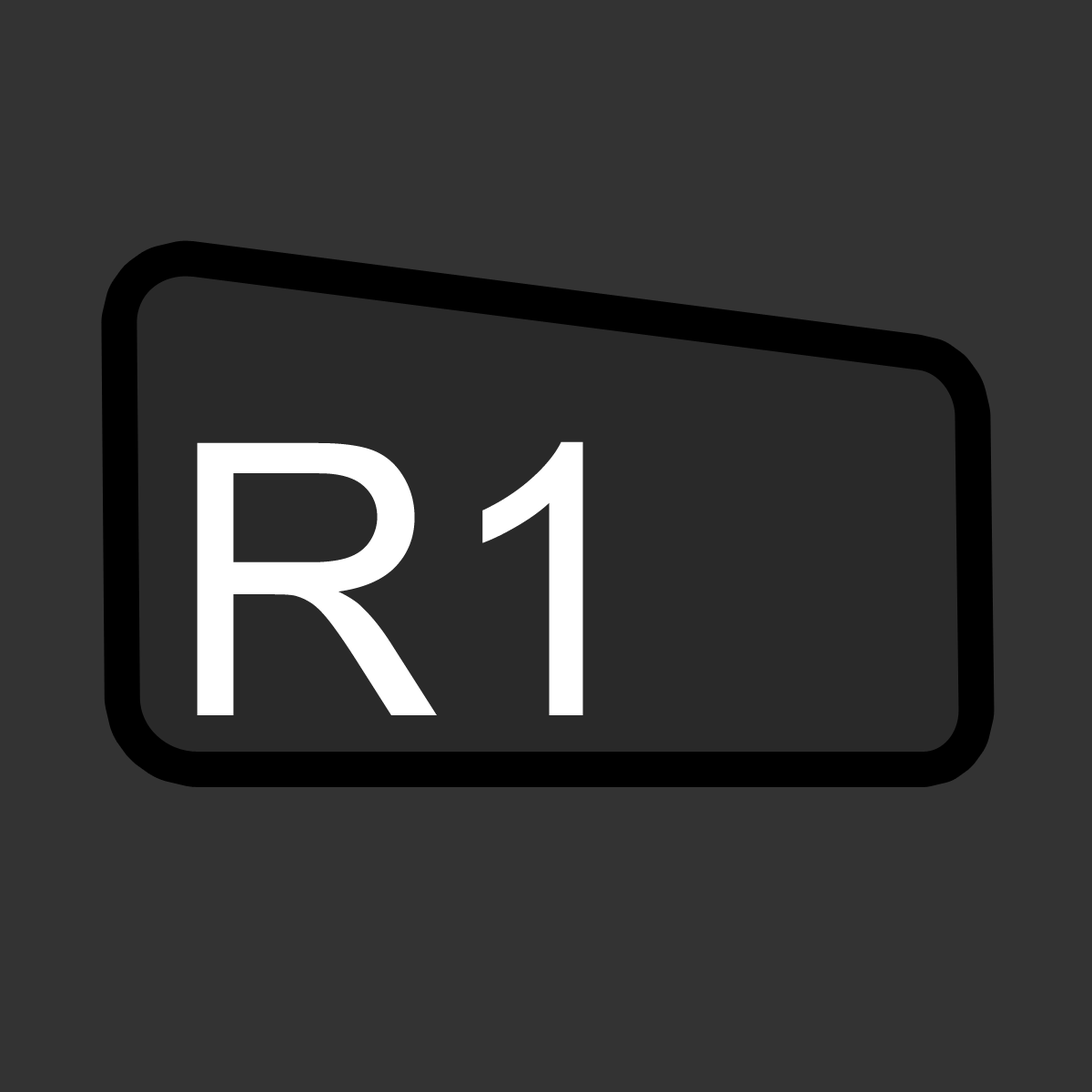
<style>
.page{position:relative;width:1092px;height:1092px;background:#333333}
.page>*{position:absolute;margin:0}
.t1{font:379.2px "ArialMT";color:#ffffff}
</style>
<div class="page">
<p class="t1" style="left:197px;top:441px;width:386px;height:274px">R1</p>
</div>
